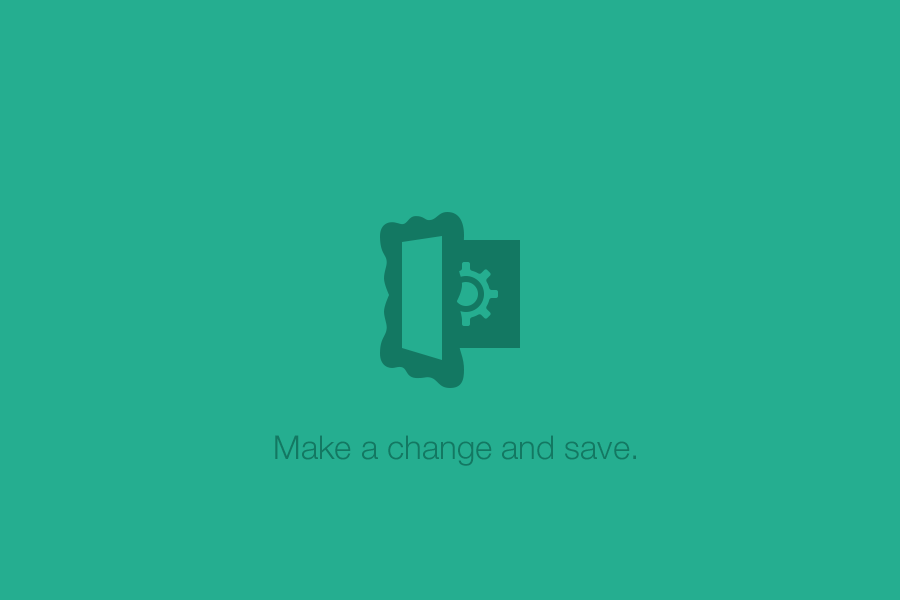
<style>
.page{position:relative;width:900px;height:600px;background:#25ae90}
.page>*{position:absolute;margin:0}
.t1{font:33px "HelveticaNeue-Light";color:#137862}
</style>
<div class="page">
<p class="t1" style="left:275px;top:435px;width:360px;height:31px">Make a change and save.</p>
<p class="t1" style="left:275px;top:435px;width:361px;height:31px">Make a change and save.</p>
</div>
